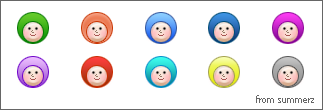
<style>
.page{position:relative;width:323px;height:110px;background:#ffffff}
.page>*{position:absolute;margin:0}
.t1{font:9px "Tahoma";color:#666666}
</style>
<div class="page">
<p class="t1" style="left:256px;top:95px;width:58px;height:8px">from summerz</p>
</div>
